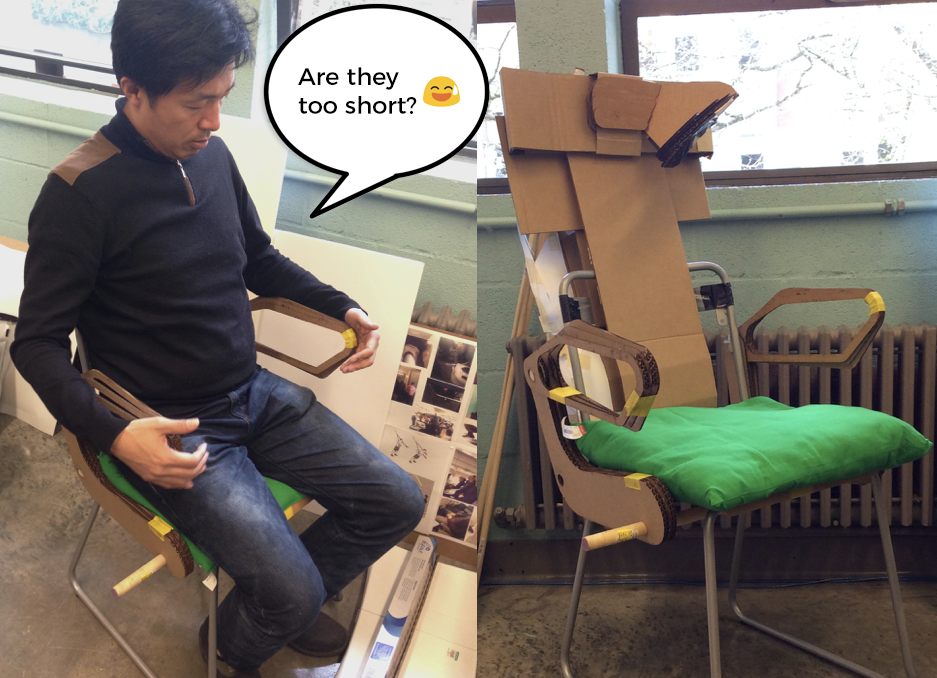
<style>
.page{position:relative;width:937px;height:678px}
.page>*{position:absolute;margin:0}
.t1{font:24px "Montserrat-Regular";color:#000000}
</style>
<div class="page">
<p class="t1" style="left:298px;top:67px;width:119px;height:47px">Are they <br>too short?</p>
</div>
